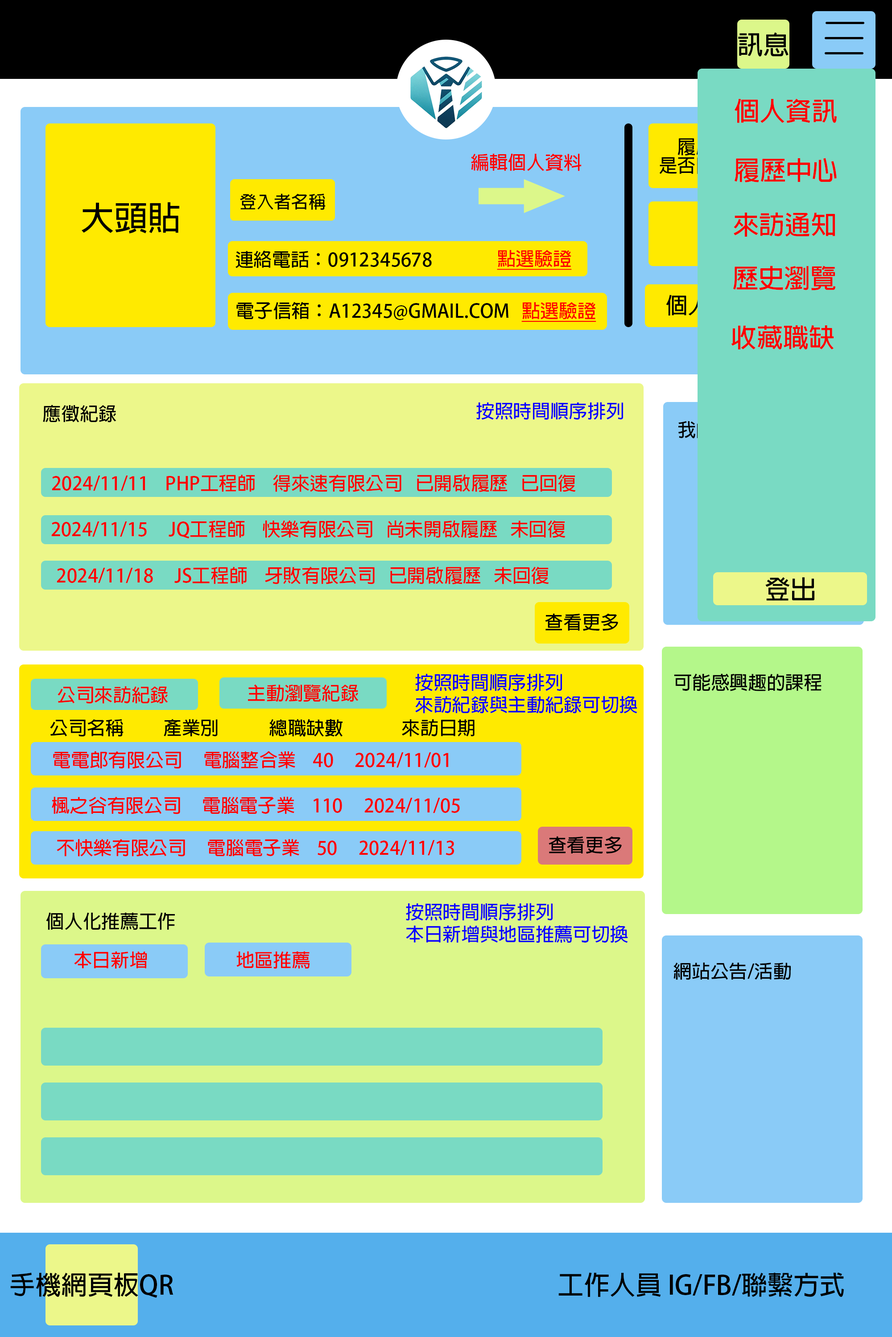
<style>
.page{position:relative;width:892px;height:1337px}
.page>*{position:absolute;margin:0}
.t1{font:26px "AdobeFanHeitiStd-Bold";color:#000000}
.t2{font:26px "AdobeFanHeitiStd-Bold";color:#ff0000}
.t3{font:18.6px/18.6px "AdobeFanHeitiStd-Bold"}
.t4{font:18.6px "AdobeFanHeitiStd-Bold";color:#ff0000}
.t5{font:33.4px "AdobeFanHeitiStd-Bold";color:#000000}
.t6{font:18.6px "AdobeFanHeitiStd-Bold";color:#000000}
.t7{font:18.6px "AdobeFanHeitiStd-Bold";color:#ff0000;text-decoration:underline}
.t8{font:18.6px "AdobeFanHeitiStd-Bold";color:#0c00ff}
.t9{font:18.6px "AdobeFanHeitiStd-Bold";color:#79dac3}
.t10{font:18.6px/22.3px "AdobeFanHeitiStd-Bold";color:#0c00ff}
</style>
<div class="page">
<p class="t1" style="left:738px;top:32px;width:50px;height:25px">訊息</p>
<p class="t2" style="left:734px;top:99px;width:102px;height:24px">個人資訊</p>
<p class="t3" style="left:659px;top:138px;width:73px;height:36px;text-align:center">履歷<br>是否開放</p>
<p class="t4" style="left:471px;top:153px;width:110px;height:18px">編輯個人資料</p>
<p class="t2" style="left:734px;top:158px;width:102px;height:24px">履歷中心</p>
<p class="t5" style="left:82px;top:202px;width:97px;height:32px">大頭貼</p>
<p class="t2" style="left:733px;top:212px;width:102px;height:25px">來訪通知</p>
<p class="t6" style="left:235px;top:251px;width:197px;height:17px">連絡電話：0912345678</p>
<p class="t7" style="left:497px;top:250px;width:75px;height:20px">點選驗證</p>
<p class="t2" style="left:732px;top:266px;width:103px;height:24px">歷史瀏覽</p>
<p class="t6" style="left:236px;top:302px;width:272px;height:18px">電子信箱：A12345@GMAIL.COM</p>
<p class="t7" style="left:521px;top:302px;width:75px;height:20px">點選驗證</p>
<p class="t2" style="left:731px;top:325px;width:103px;height:25px">收藏職缺</p>
<p class="t6" style="left:43px;top:405px;width:73px;height:18px">應徵紀錄</p>
<p class="t8" style="left:476px;top:402px;width:147px;height:18px">按照時間順序排列</p>
<p class="t9" style="left:678px;top:421px;width:73px;height:18px">我的履歷</p>
<p class="t4" style="left:52px;top:474px;width:524px;height:18px">2024/11/11    PHP工程師    得來速有限公司   已開啟履歷   已回復</p>
<p class="t4" style="left:51px;top:520px;width:514px;height:19px">2024/11/15     JQ工程師    快樂有限公司   尚未開啟履歷   未回復</p>
<p class="t4" style="left:57px;top:567px;width:492px;height:17px">2024/11/18     JS工程師    牙敗有限公司   已開啟履歷   未回復</p>
<p class="t10" style="left:415px;top:674px;width:222px;height:40px">按照時間順序排列<br>來訪紀錄與主動紀錄可切換</p>
<p class="t6" style="left:674px;top:674px;width:147px;height:17px">可能感興趣的課程</p>
<p class="t4" style="left:58px;top:686px;width:110px;height:18px">公司來訪紀錄</p>
<p class="t4" style="left:248px;top:684px;width:110px;height:18px">主動瀏覽紀錄</p>
<p class="t6" style="left:50px;top:719px;width:424px;height:18px">公司名稱          產業別            總職缺數              來訪日期</p>
<p class="t4" style="left:53px;top:751px;width:395px;height:18px">電電郎有限公司     電腦整合業    40     2024/11/01</p>
<p class="t4" style="left:52px;top:797px;width:408px;height:17px">楓之谷有限公司     電腦電子業    110     2024/11/05</p>
<p class="t4" style="left:57px;top:839px;width:397px;height:18px">不快樂有限公司     電腦電子業    50     2024/11/13</p>
<p class="t6" style="left:548px;top:836px;width:73px;height:18px">查看更多</p>
<p class="t10" style="left:406px;top:903px;width:222px;height:40px">按照時間順序排列<br>本日新增與地區推薦可切換</p>
<p class="t6" style="left:46px;top:913px;width:129px;height:17px">個人化推薦工作</p>
<p class="t4" style="left:74px;top:951px;width:73px;height:18px">本日新增</p>
<p class="t4" style="left:236px;top:951px;width:73px;height:18px">地區推薦</p>
<p class="t6" style="left:673px;top:962px;width:117px;height:18px">網站公告/活動</p>
<p class="t1" style="left:10px;top:1273px;width:163px;height:25px">手機網頁板QR</p>
<p class="t1" style="left:558px;top:1273px;width:285px;height:24px">工作人員 IG/FB/聯繫方式</p>
</div>
